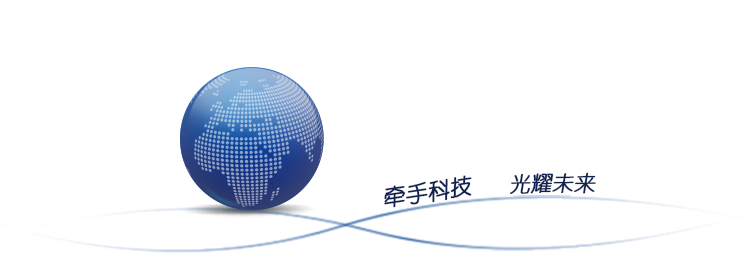
<style>
.page{position:relative;width:750px;height:270px;background:#ffffff}
.page>*{position:absolute;margin:0}
.t1{font:20.9px "YouYuan";color:#0e2050;font-weight:bold;font-style:italic}
.t2{font:21.9px "YouYuan";color:#0e2050;font-weight:bold;font-style:italic}
</style>
<div class="page">
<p class="t1" style="left:509px;top:172px;width:87px;height:22px;rotate:-1deg">光耀未来</p>
<p class="t2" style="left:384px;top:175px;width:88px;height:33px;rotate:-9deg">牵手科技</p>
</div>
